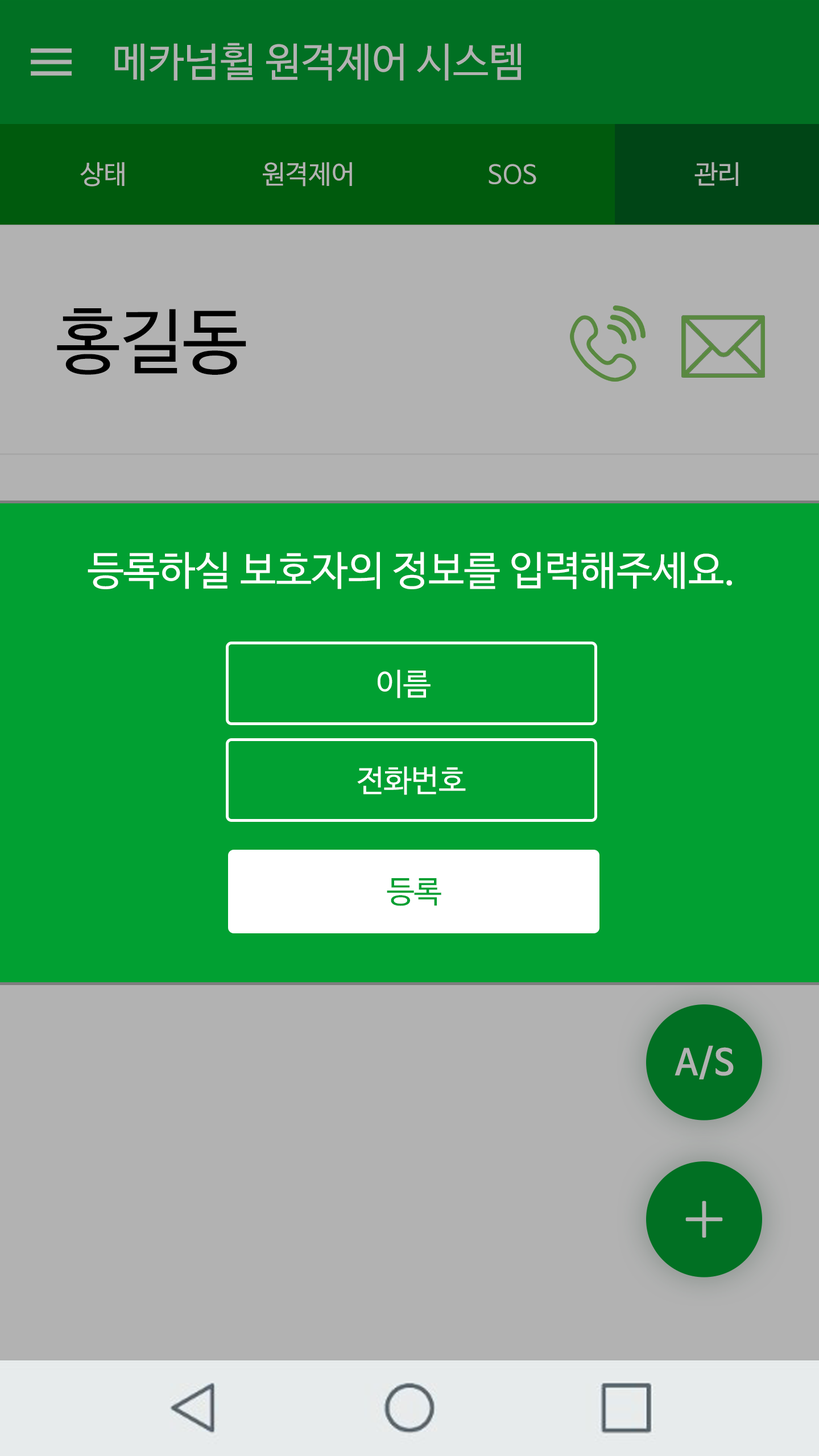
<style>
.page{position:relative;width:819px;height:1456px;background:#b2b2b2}
.page>*{position:absolute;margin:0}
.t1{font:40.3px "NanumBarunGothicOTF";color:#b2b2b2}
.t2{font:26.1px "NanumBarunGothicOTF";color:#b2b2b2}
.t3{font:71.1px "NanumBarunGothicOTF";color:#000000}
.t4{font:40.3px "NanumBarunGothicOTF";color:#ffffff}
.t5{font:30.8px "NanumBarunGothicOTF";color:#ffffff}
.t6{font:30.8px "NanumBarunGothicOTF";color:#01a032}
.t7{font:35.5px "NanumBarunGothicOTFBold";color:#b2b2b2}
</style>
<div class="page">
<p class="t1" style="left:114px;top:43px;width:407px;height:38px">메카넘휠 원격제어 시스템</p>
<p class="t2" style="left:80px;top:162px;width:45px;height:25px">상태</p>
<p class="t2" style="left:263px;top:162px;width:89px;height:25px">원격제어</p>
<p class="t2" style="left:489px;top:164px;width:47px;height:20px">SOS</p>
<p class="t2" style="left:694px;top:162px;width:44px;height:24px">관리</p>
<p class="t3" style="left:57px;top:308px;width:189px;height:67px">홍길동</p>
<p class="t4" style="left:88px;top:552px;width:644px;height:37px">등록하실 보호자의 정보를 입력해주세요.</p>
<p class="t5" style="left:377px;top:669px;width:54px;height:29px">이름</p>
<p class="t5" style="left:357px;top:766px;width:109px;height:29px">전화번호</p>
<p class="t6" style="left:387px;top:878px;width:54px;height:28px">등록</p>
<p class="t7" style="left:675px;top:1045px;width:59px;height:34px">A/S</p>
</div>
